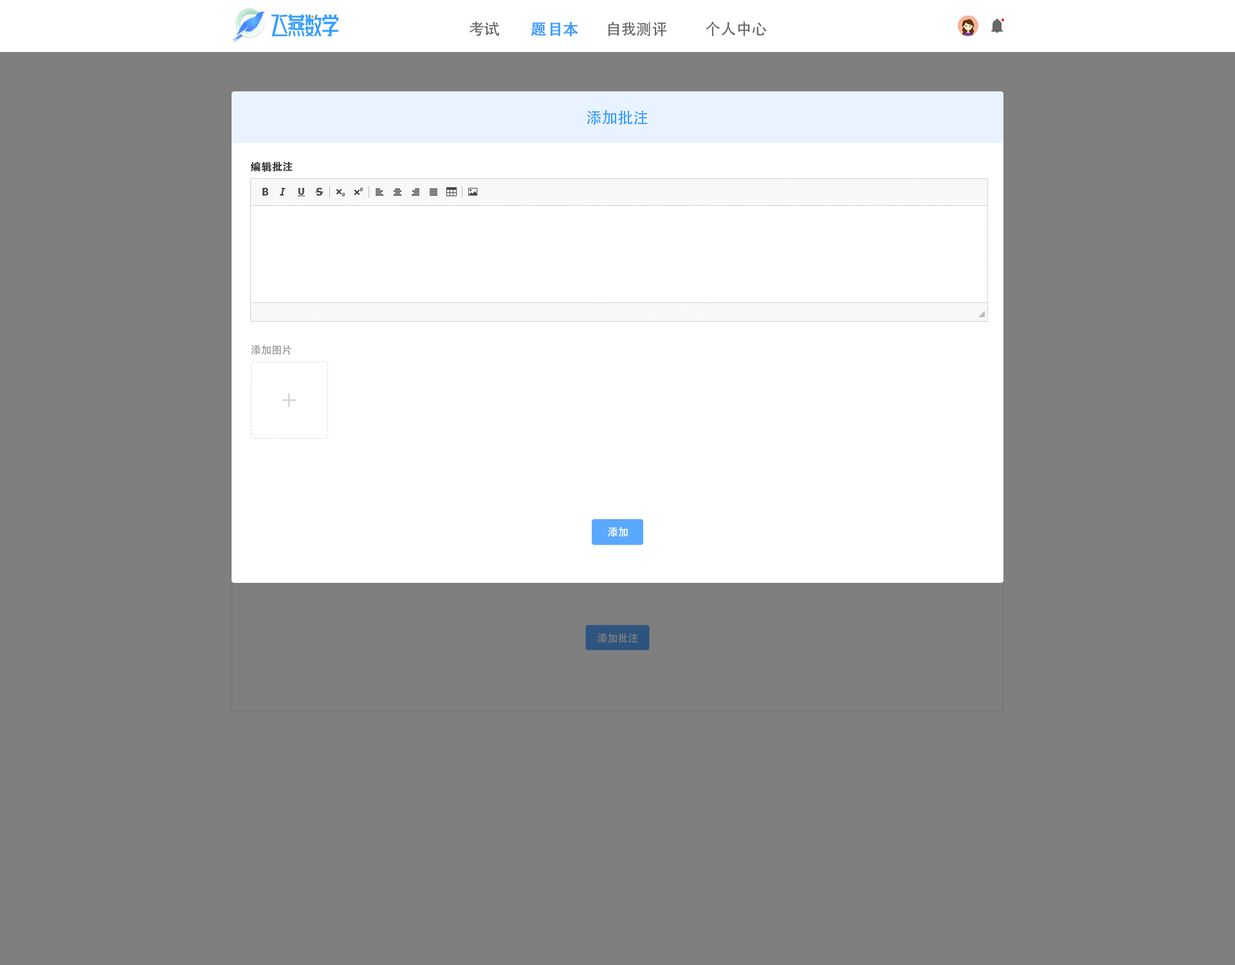
<style>
.page{position:relative;width:1235px;height:965px;background:#7f7f7f}
.page>*{position:absolute;margin:0}
.t1{font:15.4px "AdobeHeitiStd-Regular";color:#666666}
.t2{font:15.4px "AdobeHeitiStd-Regular";color:#409eff;font-weight:bold}
.t3{font:15.4px "AdobeHeitiStd-Regular";color:#339dff}
.t4{font:10.3px "AdobeHeitiStd-Regular";color:#333333;font-weight:bold}
.t5{font:10.3px "AdobeHeitiStd-Regular";color:#999999}
.t6{font:19.3px "AdobeHeitiStd-Regular";color:#d1d1d1}
.t7{font:10.3px "AdobeHeitiStd-Regular";color:#ffffff}
.t8{font:10.3px "AdobeHeitiStd-Regular";color:#7f7f7f}
</style>
<div class="page">
<p class="t1" style="left:469px;top:21px;width:31px;height:15px">考试</p>
<p class="t2" style="left:531px;top:22px;width:47px;height:15px">题目本</p>
<p class="t1" style="left:608px;top:21px;width:59px;height:16px">自我测评</p>
<p class="t1" style="left:706px;top:21px;width:61px;height:15px">个人中心</p>
<p class="t3" style="left:587px;top:110px;width:61px;height:15px">添加批注</p>
<p class="t4" style="left:250px;top:162px;width:43px;height:10px">编辑批注</p>
<p class="t5" style="left:251px;top:345px;width:40px;height:10px">添加图片</p>
<p class="t6" style="left:282px;top:393px;width:14px;height:14px">＋</p>
<p class="t7" style="left:608px;top:527px;width:20px;height:10px">添加</p>
<p class="t8" style="left:598px;top:633px;width:40px;height:10px">添加批注</p>
</div>
